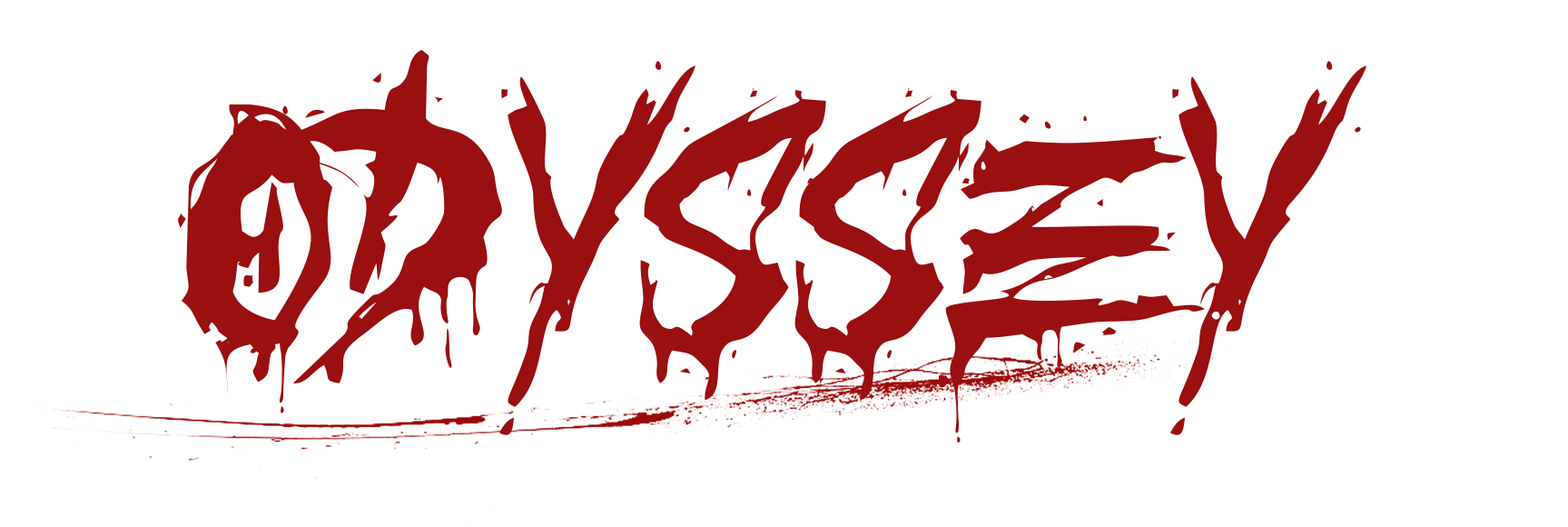
<style>
.page{position:relative;width:1568px;height:527px;background:#ffffff}
.page>*{position:absolute;margin:0}
.t1{font:605.3px "ZOMBIESREBORN";color:#9a0f0f}
</style>
<div class="page">
<p class="t1" style="left:178px;top:49px;width:1189px;height:394px">Odyssey</p>
</div>
